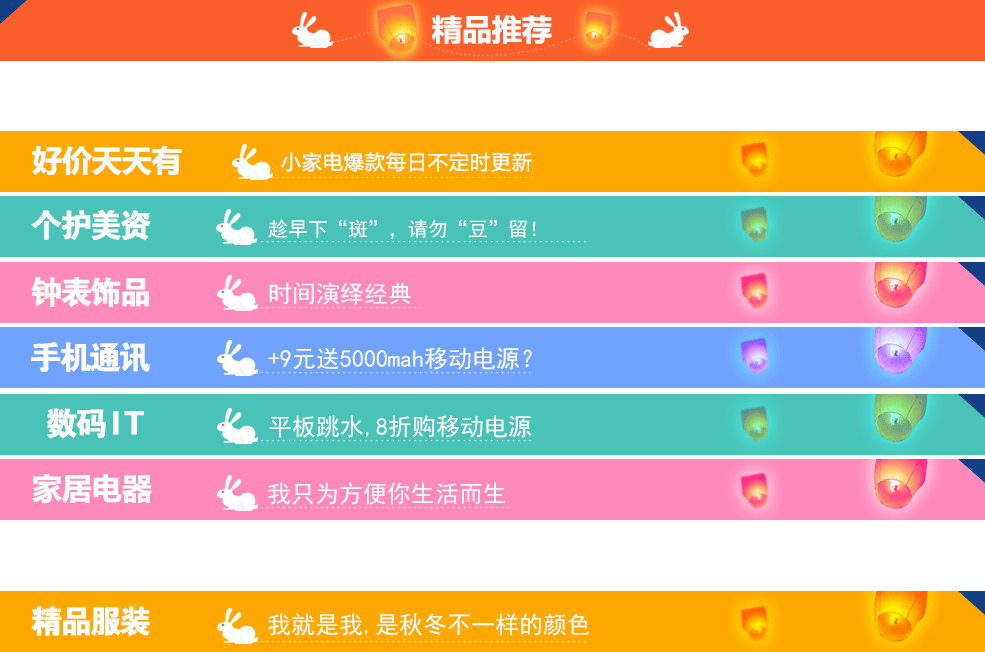
<style>
.page{position:relative;width:985px;height:652px;background:#ffffff}
.page>*{position:absolute;margin:0}
.t1{font:32px "FZDHTJW--GB1-0";letter-spacing:-0.1em;color:#ffffff;font-weight:bold}
.t2{font:20px "SimHei";color:#ffffff}
.t3{font:24px "SimHei";color:#ffffff}
</style>
<div class="page">
<p class="t1" style="left:31px;top:209px;width:120px;height:32px">个护美资</p>
<p class="t2" style="left:268px;top:219px;width:268px;height:20px">趁早下“斑”，请勿“豆”留！</p>
<p class="t1" style="left:31px;top:277px;width:118px;height:31px">钟表饰品</p>
<p class="t3" style="left:269px;top:282px;width:142px;height:23px">时间演绎经典</p>
<p class="t1" style="left:31px;top:341px;width:119px;height:31px">手机通讯</p>
<p class="t3" style="left:268px;top:347px;width:264px;height:23px">+9元送5000mah移动电源？</p>
<p class="t1" style="left:46px;top:408px;width:98px;height:31px">数码 I T</p>
<p class="t3" style="left:269px;top:415px;width:263px;height:23px">平板跳水,8折购移动电源</p>
<p class="t3" style="left:268px;top:482px;width:237px;height:23px">我只为方便你生活而生</p>
<p class="t1" style="left:31px;top:606px;width:119px;height:31px">精品服装</p>
<p class="t3" style="left:268px;top:613px;width:322px;height:23px">我就是我,是秋冬不一样的颜色</p>
</div>
